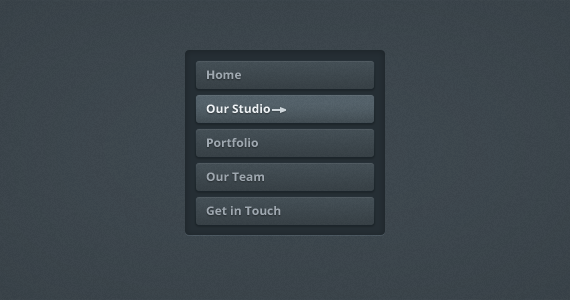
<style>
.page{position:relative;width:570px;height:300px}
.page>*{position:absolute;margin:0}
.t1{font:12px "OpenSans-Bold";color:#9fa8b0}
.t2{font:12px "OpenSans-Bold";color:#eef2f5}
</style>
<div class="page">
<p class="t1" style="left:207px;top:70px;width:34px;height:9px">Home</p>
<p class="t2" style="left:206px;top:104px;width:64px;height:9px">Our Studio</p>
<p class="t1" style="left:207px;top:138px;width:51px;height:9px">Portfolio</p>
<p class="t1" style="left:206px;top:172px;width:58px;height:9px">Our Team</p>
<p class="t1" style="left:206px;top:206px;width:75px;height:9px">Get in Touch</p>
</div>
